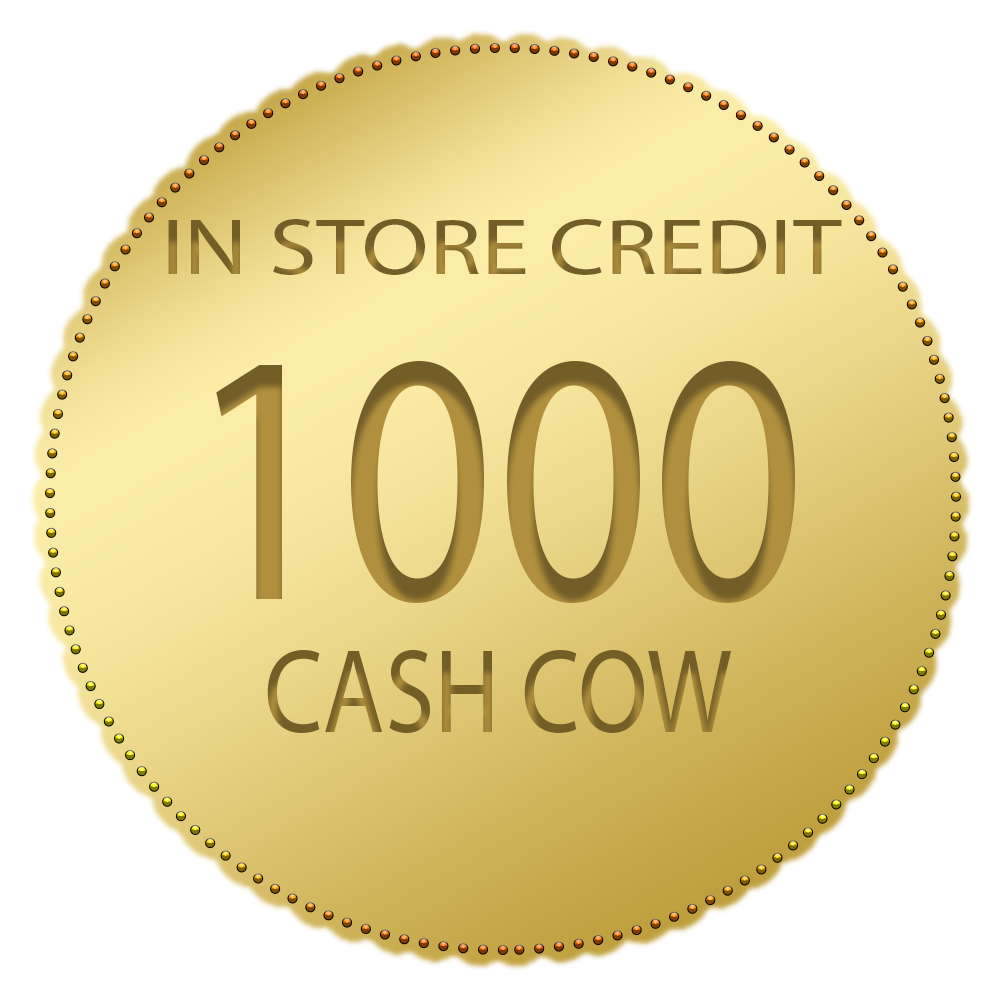
<style>
.page{position:relative;width:1000px;height:1000px;background:#ffffff}
.page>*{position:absolute;margin:0}
.t1{font:80px "MyriadPro-Regular";scale:1.21 1}
.t2{font:360.4px "MyriadPro-Regular";color:#b0903e;scale:0.84 1}
.t3{font:120px "MyriadPro-Regular";scale:0.84 1}
</style>
<div class="page">
<p class="t1" style="left:168px;top:219px;width:674px;height:56px">IN STORE CREDIT</p>
<p class="t2" style="left:216px;top:361px;width:579px;height:242px">1000</p>
<p class="t3" style="left:267px;top:649px;width:464px;height:85px">CASH COW</p>
</div>
